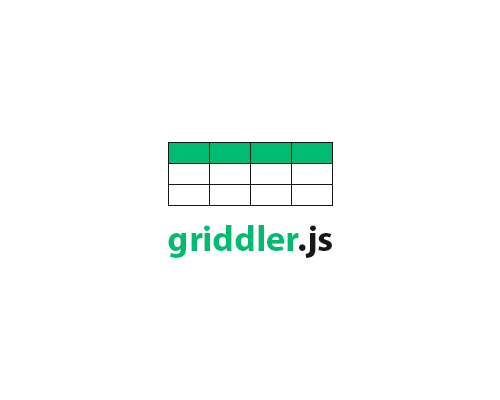
<style>
.page{position:relative;width:500px;height:400px;background:#ffffff}
.page>*{position:absolute;margin:0}
.t1{font:36.6px "MyriadPro-Bold";color:#00bb71}
.t2{font:36.6px "MyriadPro-Bold";color:#181818}
</style>
<div class="page">
<p class="t1" style="left:168px;top:225px;width:164px;height:33px">griddler<span class="t2">.js</span></p>
</div>
